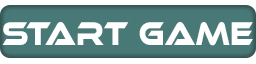
<style>
.page{position:relative;width:256px;height:64px;background:#497977}
.page>*{position:absolute;margin:0}
.t1{font:34px "EthnocentricRg-Regular";color:#ffffff;scale:0.8 1}
</style>
<div class="page">
<p class="t1" style="left:2px;top:22px;width:251px;height:24px">sTART gAMe</p>
</div>
